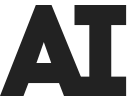
<style>
.page{position:relative;width:131px;height:100px;background:#222222}
.page>*{position:absolute;margin:0}
.t1{font:128px "CodePro-Bold";color:#222222}
</style>
<div class="page">
<p class="t1" style="left:0px;top:5px;width:89px;height:91px">A</p>
<p class="t1" style="left:74px;top:5px;width:53px;height:91px">I</p>
</div>
